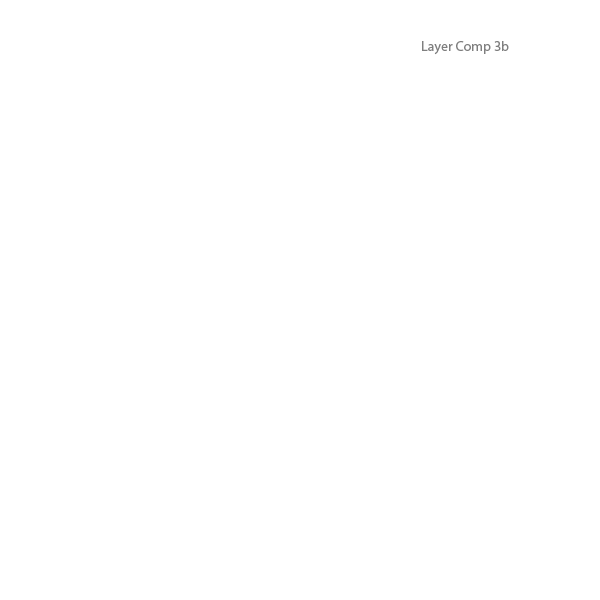
<style>
.page{position:relative;width:600px;height:600px;background:#ffffff}
.page>*{position:absolute;margin:0}
.t1{font:14px "MyriadPro-Regular";color:#7f7f7f}
</style>
<div class="page">
<p class="t1" style="left:422px;top:41px;width:87px;height:14px">Layer Comp 3b</p>
</div>
